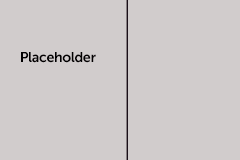
<style>
.page{position:relative;width:240px;height:160px;background:#d1cccc}
.page>*{position:absolute;margin:0}
.t1{font:14.2px "MuseoSans-700";letter-spacing:-0.025em;color:#020001}
</style>
<div class="page">
<p class="t1" style="left:21px;top:52px;width:75px;height:11px">Placeholder</p>
</div>
